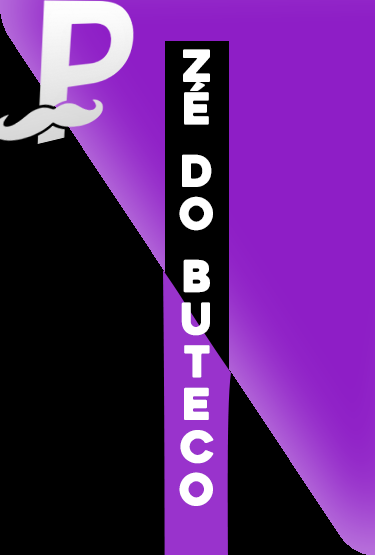
<style>
.page{position:relative;width:375px;height:555px;background:#000000}
.page>*{position:absolute;margin:0}
.t1{font:62.5px/21.5px "Heavitas";letter-spacing:-0.025em;color:#ffffff;font-variant:small-caps}
</style>
<div class="page">
<p class="t1" style="left:179px;top:49px;width:35px;height:457px;text-align:center">zé do buteco</p>
</div>
